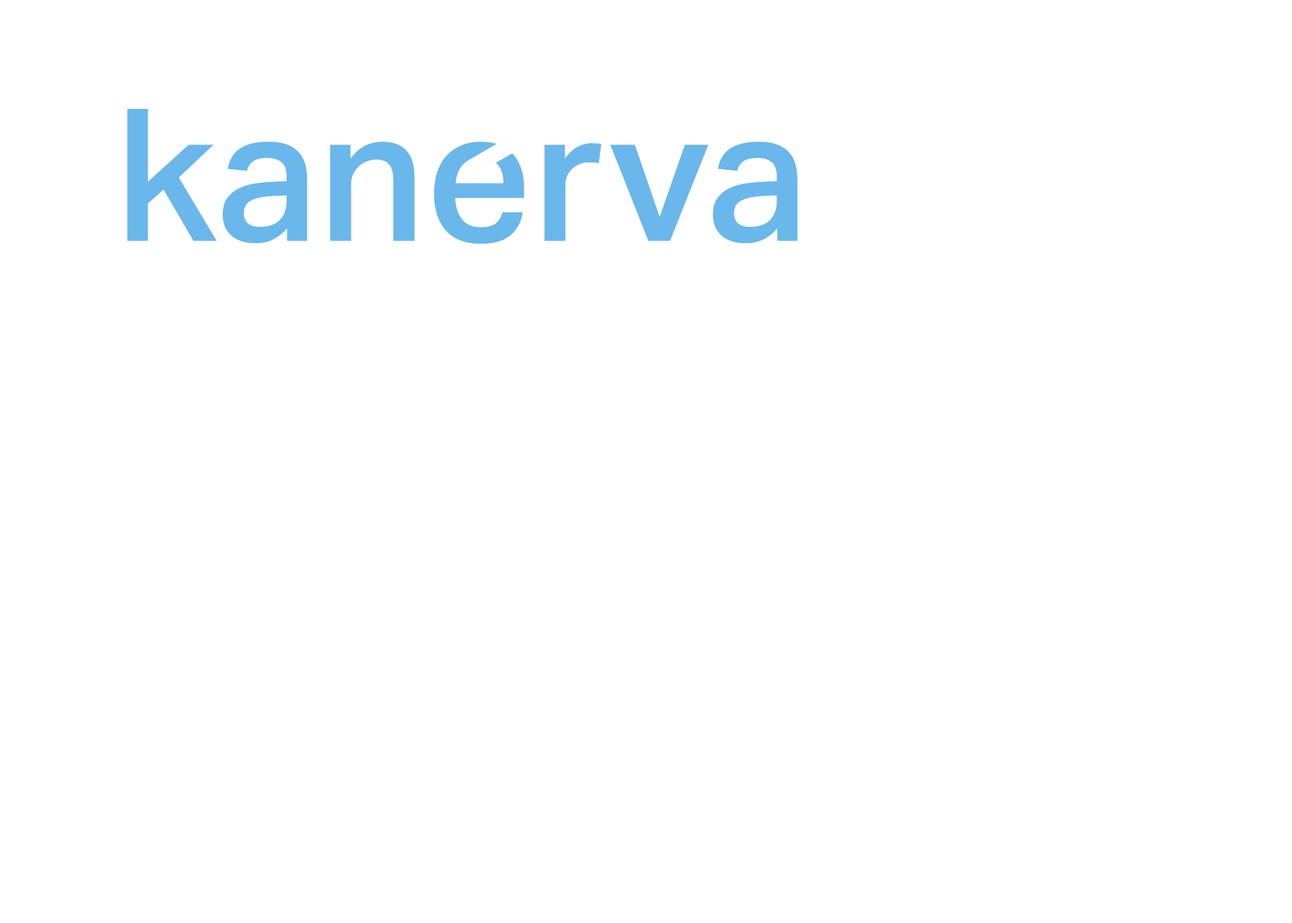
<style>
.page{position:relative;width:1292px;height:923px;background:#ffffff}
.page>*{position:absolute;margin:0}
.t1{font:184.6px "AktivGrotesk-Medium";color:#6ab7eb}
</style>
<div class="page">
<p class="t1" style="left:127px;top:109px;width:671px;height:135px">kanerva</p>
</div>
